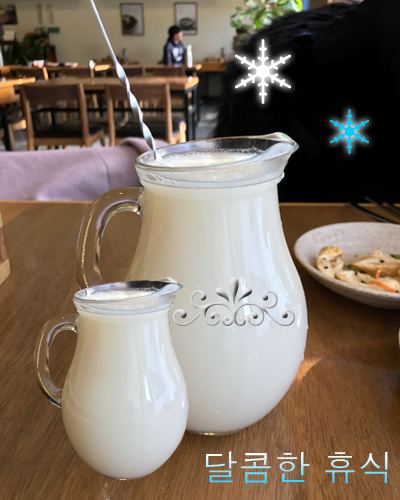
<style>
.page{position:relative;width:400px;height:500px}
.page>*{position:absolute;margin:0}
.t1{font:36px "Dotum"}
</style>
<div class="page">
<p class="t1" style="left:206px;top:451px;width:182px;height:33px">달콤한 휴식</p>
</div>
